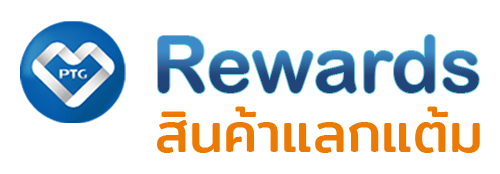
<style>
.page{position:relative;width:500px;height:174px;background:#ffffff}
.page>*{position:absolute;margin:0}
.t1{font:77.7px "ArialRoundedMTBold"}
.t2{font:55.3px "Mitr-Regular";color:#ec7a00}
</style>
<div class="page">
<p class="t1" style="left:158px;top:35px;width:321px;height:58px">Rewards</p>
<p class="t2" style="left:157px;top:106px;width:323px;height:47px">สินค้าแลกแต้ม</p>
</div>
